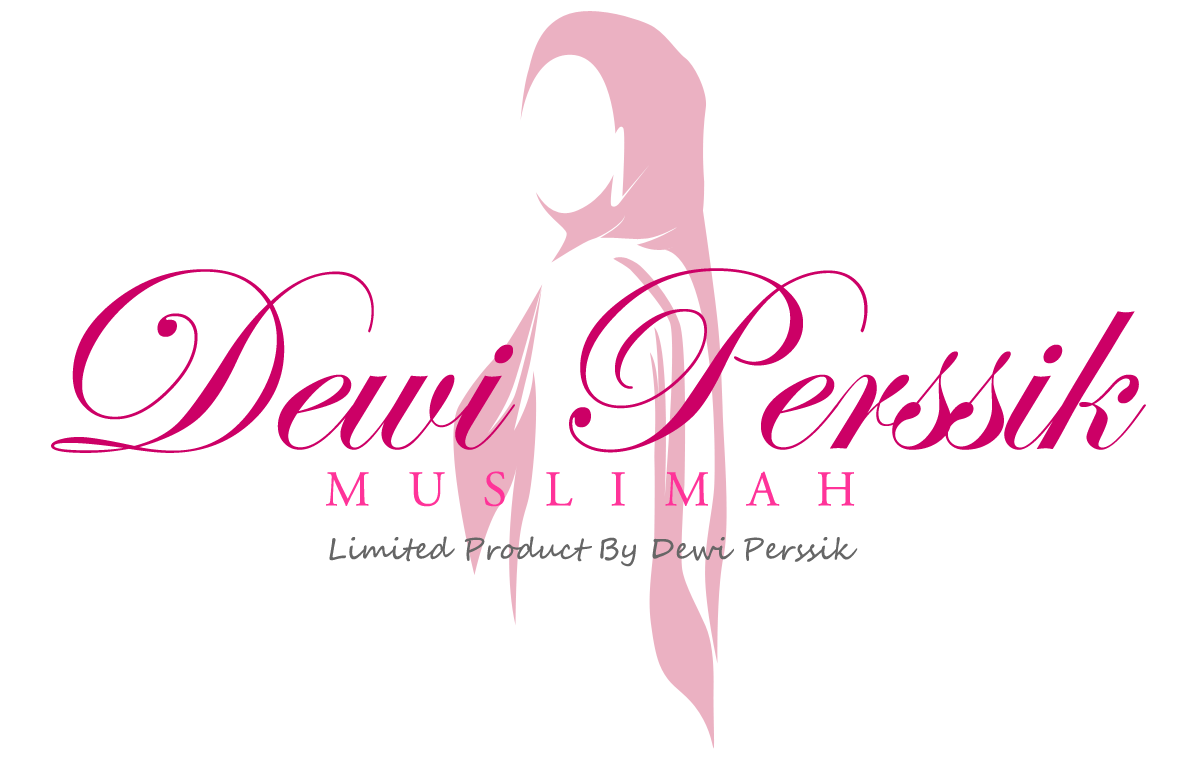
<style>
.page{position:relative;width:1181px;height:760px;background:#ffffff}
.page>*{position:absolute;margin:0}
.t1{font:270.8px "EdwardianScriptITC";color:#cc0066}
.t2{font:50px "AGaramondPro-Regular";color:#ff3399}
.t3{font:29.2px "SegoeScript";color:#666666}
</style>
<div class="page">
<p class="t1" style="left:51px;top:268px;width:1095px;height:185px">Dewi Perssik</p>
<p class="t2" style="left:326px;top:471px;width:529px;height:36px">M   U   S   L   I   M   A   H</p>
<p class="t3" style="left:329px;top:536px;width:529px;height:31px">Limited Product By Dewi Perssik</p>
</div>
